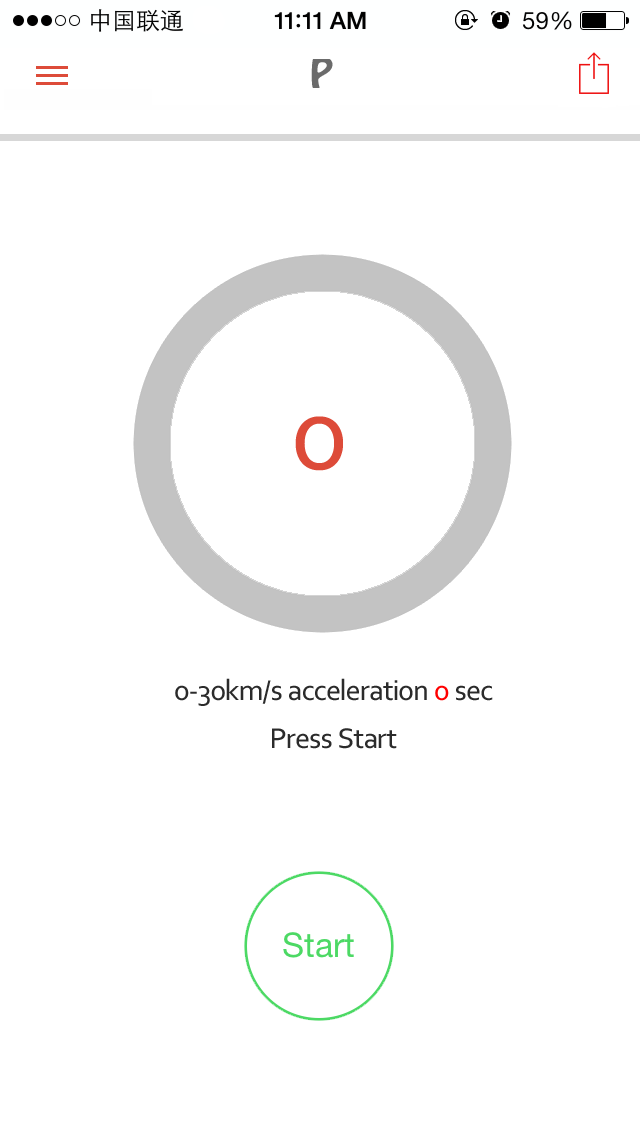
<style>
.page{position:relative;width:640px;height:1136px;background:#ffffff}
.page>*{position:absolute;margin:0}
.t1{font:36px "HoboStd";color:#6b6b6b}
.t2{font:110.5px "Corbel";color:#dd4b39}
.t3{font:30px/48px "Corbel";color:#2b2b2b}
.t4{font:30px/48px "Corbel";color:#ff0000}
</style>
<div class="page">
<p class="t1" style="left:311px;top:58px;width:22px;height:30px">P</p>
<p class="t2" style="left:295px;top:416px;width:48px;height:55px">0</p>
<p class="t3" style="left:175px;top:678px;width:318px;height:71px;text-align:center">0-30km/s acceleration <span class="t4">0</span> sec<br>Press Start</p>
</div>
